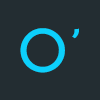
<style>
.page{position:relative;width:100px;height:100px;background:#232d32}
.page>*{position:absolute;margin:0}
.t1{font:60px "JosefinSans-Regular";letter-spacing:0.025em;color:#0cd0fc}
</style>
<div class="page">
<p class="t1" style="left:20px;top:28px;width:59px;height:45px">O’</p>
</div>
